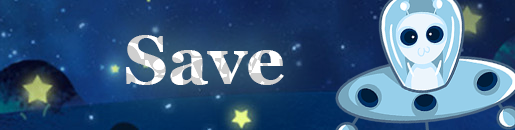
<style>
.page{position:relative;width:515px;height:130px}
.page>*{position:absolute;margin:0}
.t1{font:33px "Georgia-Bold"}
</style>
<div class="page">
<p class="t1" style="left:126px;top:35px;width:158px;height:50px">Save</p>
</div>
